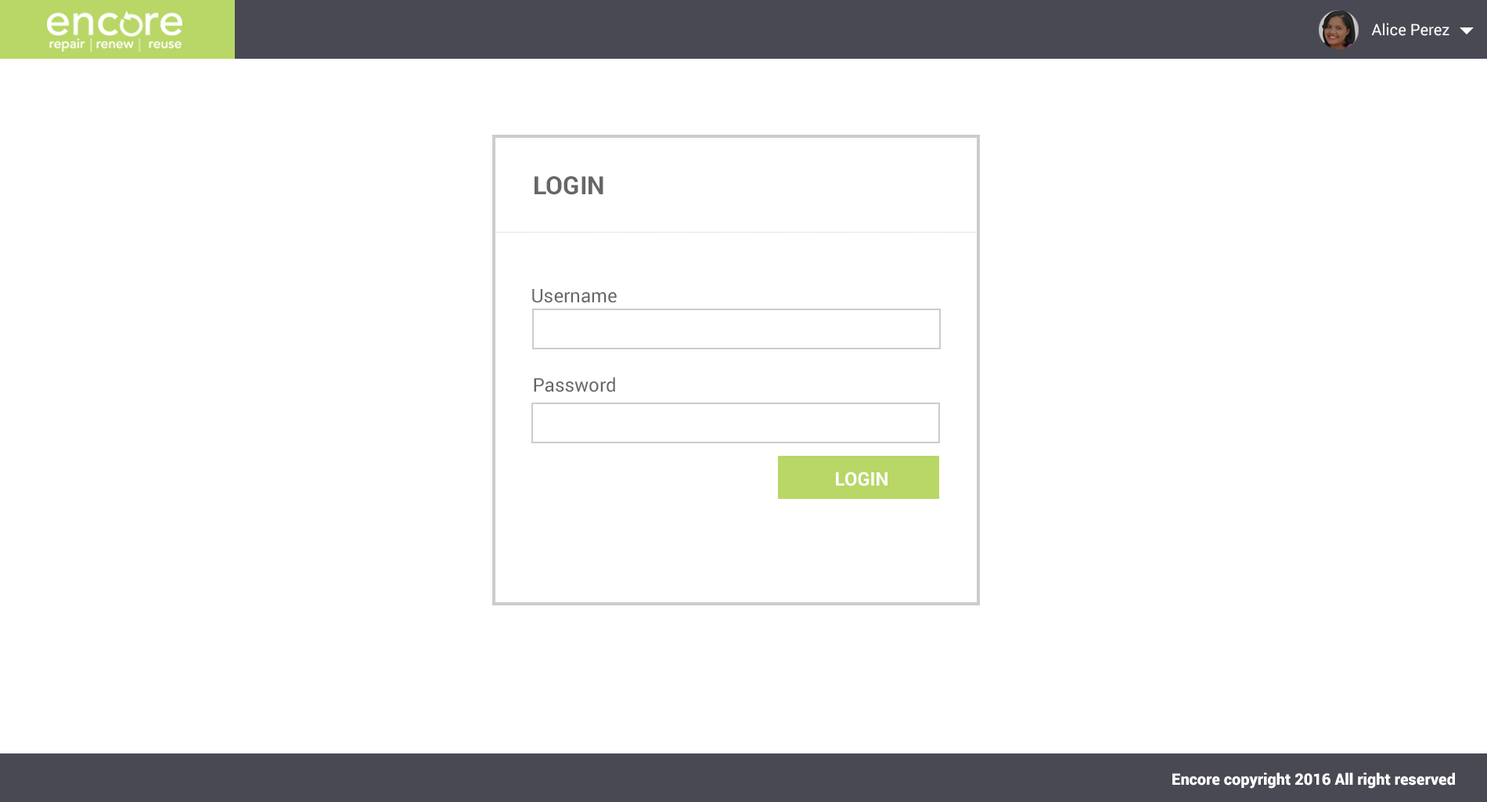
<style>
.page{position:relative;width:1487px;height:802px;background:#ffffff}
.page>*{position:absolute;margin:0}
.t1{font:15.7px "Roboto-Regular";color:#fffefe}
.t2{font:25.1px "Roboto-Bold";color:#666666}
.t3{font:18.8px "Roboto-Regular";color:#666666}
.t4{font:18.8px "Roboto-Bold";color:#fffcfc}
.t5{font:15.7px "Roboto-Black";color:#ffffff}
</style>
<div class="page">
<p class="t1" style="left:1372px;top:23px;width:78px;height:13px">Alice Perez</p>
<p class="t2" style="left:535px;top:176px;width:69px;height:19px">LOGIN</p>
<p class="t3" style="left:532px;top:289px;width:85px;height:14px">Username</p>
<p class="t3" style="left:534px;top:377px;width:81px;height:15px">Password</p>
<p class="t4" style="left:836px;top:471px;width:52px;height:15px">LOGIN</p>
<p class="t5" style="left:1173px;top:772px;width:282px;height:16px">Encore copyright 2016 All right reserved</p>
</div>
